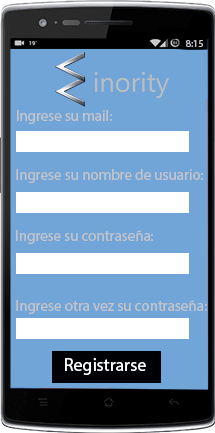
<style>
.page{position:relative;width:215px;height:433px;background:#71a4d7}
.page>*{position:absolute;margin:0}
.t1{font:10px "MyriadPro-Regular";color:#c4c5cb}
.t2{font:15px "MyriadPro-Regular";color:#c4c5cb}
.t3{font:18px "MyriadPro-Regular";color:#ffffff}
</style>
<div class="page">
<p class="t1" style="left:186px;top:40px;width:17px;height:7px">8:15</p>
<p class="t2" style="left:17px;top:110px;width:95px;height:14px">Ingrese su mail:</p>
<p class="t2" style="left:16px;top:169px;width:187px;height:14px">Ingrese su nombre de usuario:</p>
<p class="t2" style="left:16px;top:230px;width:137px;height:14px">Ingrese su contraseña:</p>
<p class="t2" style="left:16px;top:300px;width:191px;height:14px">Ingrese otra vez su contraseña:</p>
<p class="t3" style="left:65px;top:358px;width:81px;height:17px">Registrarse</p>
</div>
